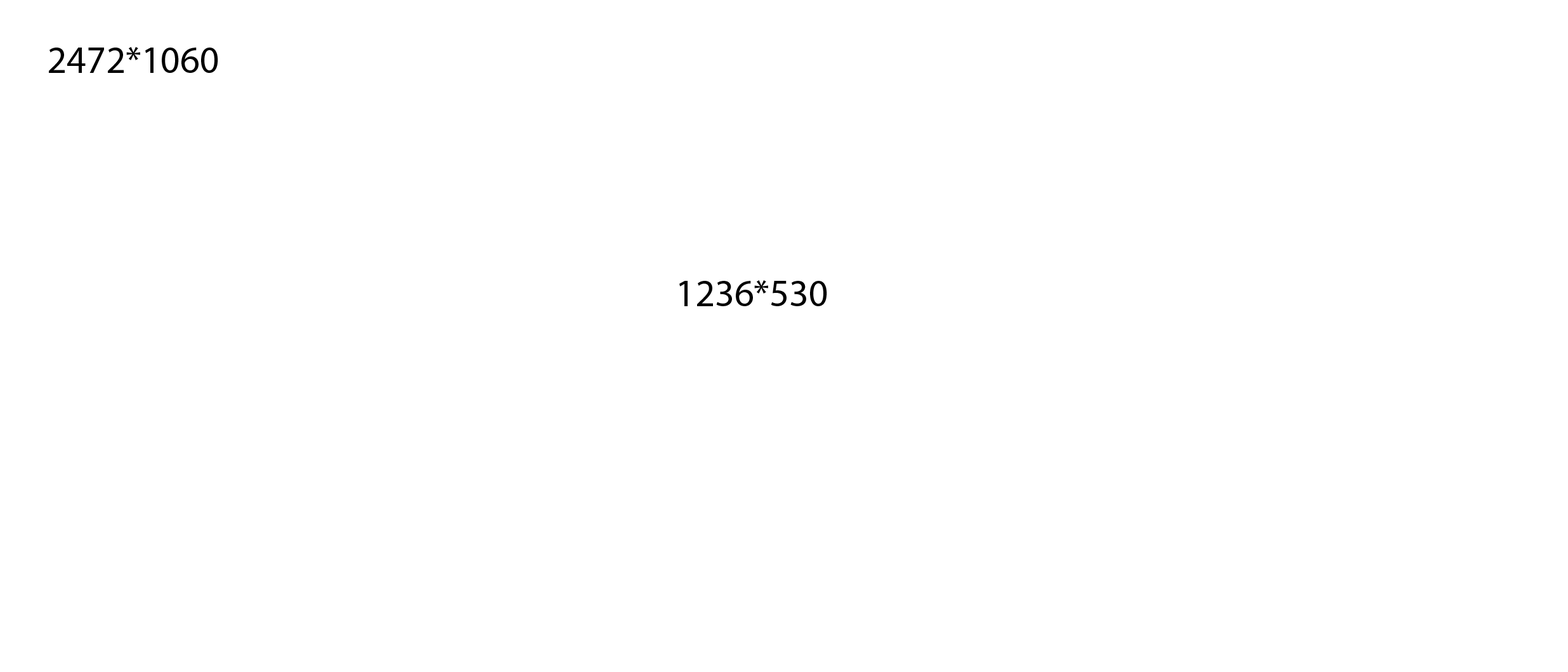
<style>
.page{position:relative;width:1568px;height:672px;background:#ffffff}
.page>*{position:absolute;margin:0}
.t1{font:38.1px "MyriadPro-Regular";color:#000000}
</style>
<div class="page">
<p class="t1" style="left:49px;top:47px;width:169px;height:26px">2472*1060</p>
<p class="t1" style="left:679px;top:280px;width:148px;height:26px">1236*530</p>
</div>
